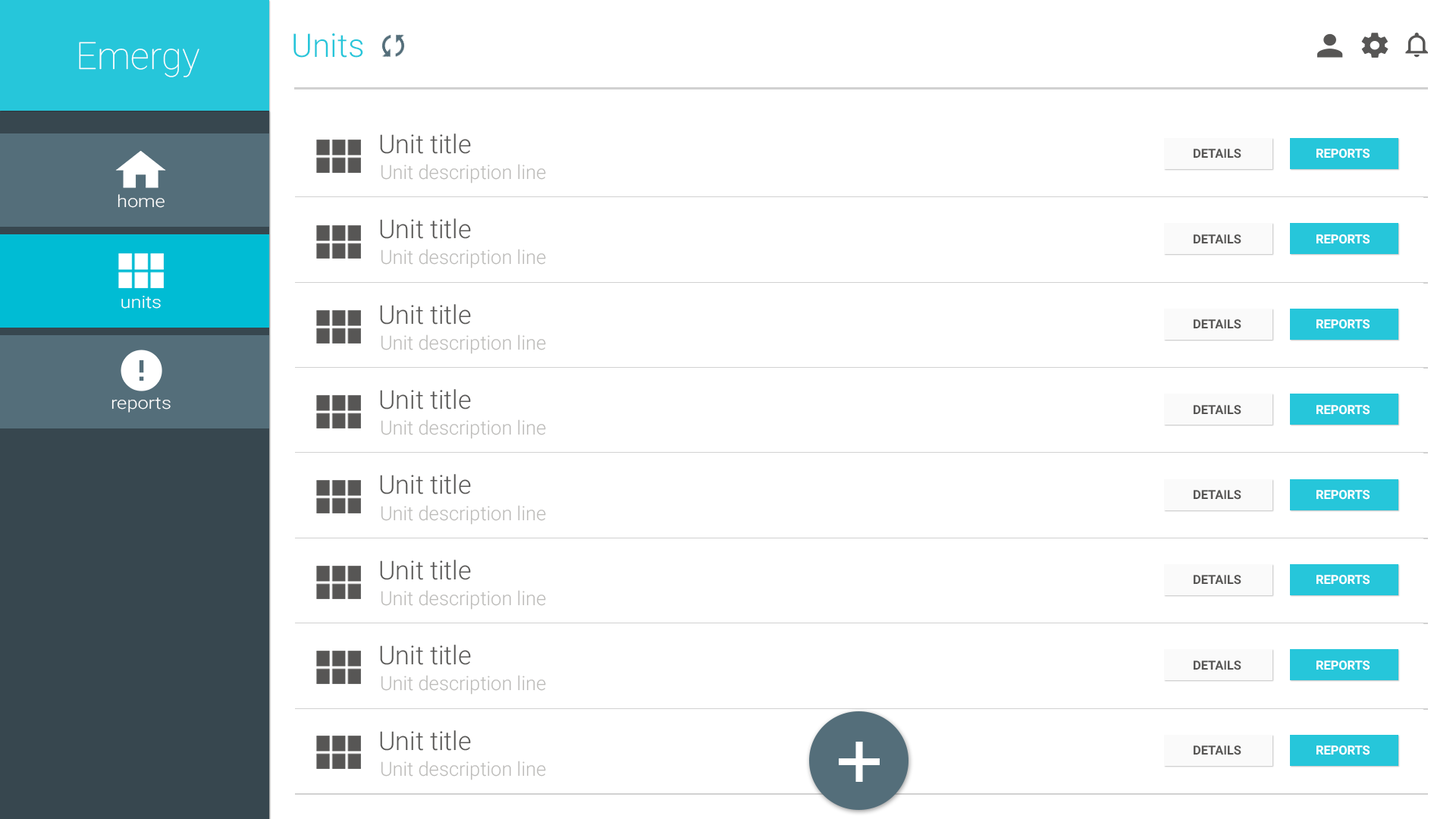
<style>
.page{position:relative;width:1456px;height:819px;background:#ffffff}
.page>*{position:absolute;margin:0}
.t1{font:37.6px "Roboto-Thin";color:#ffffff}
.t2{font:32.6px "Roboto-Light";color:#26c6da}
.t3{font:26.1px "Roboto-Light";color:#575655}
.t4{font:12.5px "Roboto-Bold";color:#575655}
.t5{font:12.5px "Roboto-Bold";color:#ffffff}
.t6{font:19.5px "Roboto-Light";color:#bcbbb9}
.t7{font:16.7px "Roboto-Light";color:#ffffff;scale:1.15 1}
</style>
<div class="page">
<p class="t1" style="left:79px;top:42px;width:120px;height:35px">Emergy</p>
<p class="t2" style="left:293px;top:33px;width:70px;height:25px">Units</p>
<p class="t3" style="left:380px;top:133px;width:91px;height:21px">Unit title</p>
<p class="t4" style="left:1194px;top:149px;width:47px;height:9px">DETAILS</p>
<p class="t5" style="left:1316px;top:149px;width:54px;height:9px">REPORTS</p>
<p class="t6" style="left:381px;top:164px;width:165px;height:20px">Unit description line</p>
<p class="t7" style="left:118px;top:194px;width:47px;height:14px">home</p>
<p class="t3" style="left:380px;top:218px;width:91px;height:21px">Unit title</p>
<p class="t4" style="left:1194px;top:234px;width:47px;height:10px">DETAILS</p>
<p class="t5" style="left:1316px;top:234px;width:54px;height:10px">REPORTS</p>
<p class="t6" style="left:381px;top:249px;width:165px;height:19px">Unit description line</p>
<p class="t7" style="left:121px;top:296px;width:40px;height:13px">units</p>
<p class="t3" style="left:380px;top:304px;width:91px;height:21px">Unit title</p>
<p class="t4" style="left:1194px;top:319px;width:47px;height:10px">DETAILS</p>
<p class="t5" style="left:1316px;top:319px;width:54px;height:10px">REPORTS</p>
<p class="t6" style="left:381px;top:334px;width:165px;height:20px">Unit description line</p>
<p class="t3" style="left:380px;top:389px;width:91px;height:20px">Unit title</p>
<p class="t7" style="left:111px;top:397px;width:60px;height:16px">reports</p>
<p class="t4" style="left:1194px;top:405px;width:47px;height:10px">DETAILS</p>
<p class="t5" style="left:1316px;top:405px;width:54px;height:10px">REPORTS</p>
<p class="t6" style="left:381px;top:419px;width:165px;height:20px">Unit description line</p>
<p class="t3" style="left:380px;top:474px;width:91px;height:20px">Unit title</p>
<p class="t4" style="left:1194px;top:490px;width:47px;height:10px">DETAILS</p>
<p class="t5" style="left:1316px;top:490px;width:54px;height:10px">REPORTS</p>
<p class="t6" style="left:381px;top:505px;width:165px;height:20px">Unit description line</p>
<p class="t3" style="left:380px;top:560px;width:91px;height:20px">Unit title</p>
<p class="t4" style="left:1194px;top:575px;width:47px;height:10px">DETAILS</p>
<p class="t5" style="left:1316px;top:575px;width:54px;height:10px">REPORTS</p>
<p class="t6" style="left:381px;top:590px;width:165px;height:20px">Unit description line</p>
<p class="t3" style="left:380px;top:645px;width:91px;height:20px">Unit title</p>
<p class="t4" style="left:1194px;top:660px;width:47px;height:10px">DETAILS</p>
<p class="t5" style="left:1316px;top:660px;width:54px;height:10px">REPORTS</p>
<p class="t6" style="left:381px;top:675px;width:165px;height:20px">Unit description line</p>
<p class="t3" style="left:380px;top:730px;width:91px;height:21px">Unit title</p>
<p class="t4" style="left:1194px;top:745px;width:47px;height:10px">DETAILS</p>
<p class="t5" style="left:1316px;top:745px;width:54px;height:10px">REPORTS</p>
<p class="t6" style="left:381px;top:761px;width:165px;height:19px">Unit description line</p>
</div>
